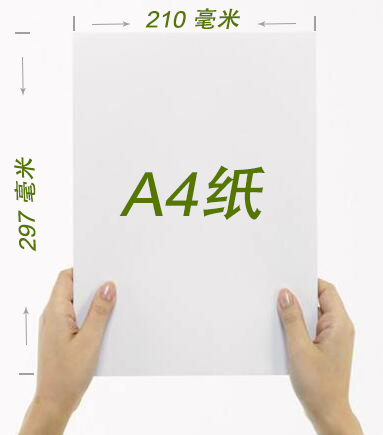
<style>
.page{position:relative;width:383px;height:435px}
.page>*{position:absolute;margin:0}
.t1{font:22.8px "LingoesUnicode";color:#557700;font-style:italic;scale:1.05 1}
.t2{font:22.8px "AdobeHeitiStd-Regular";color:#557700;font-style:italic;scale:1.05 1}
.t3{font:60.8px "LingoesUnicode";color:#557700;font-style:italic;scale:1.05 1}
.t4{font:60.8px "AdobeHeitiStd-Regular";color:#557700;font-style:italic;scale:1.05 1}
</style>
<div class="page">
<p class="t1" style="left:145px;top:8px;width:95px;height:21px">210 <span class="t2">毫米</span></p>
<p class="t1" style="left:14px;top:157px;width:22px;height:95px;rotate:-92deg">297 <span class="t2">毫米</span></p>
<p class="t3" style="left:119px;top:165px;width:146px;height:55px">A4<span class="t4">纸</span></p>
</div>
